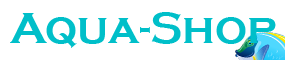
<style>
.page{position:relative;width:285px;height:60px;background:#ffffff}
.page>*{position:absolute;margin:0}
.t1{font:45.1px "CopperplateGothic-Bold";color:#00bfc9}
</style>
<div class="page">
<p class="t1" style="left:10px;top:12px;width:266px;height:36px">Aqua-Shop</p>
</div>
